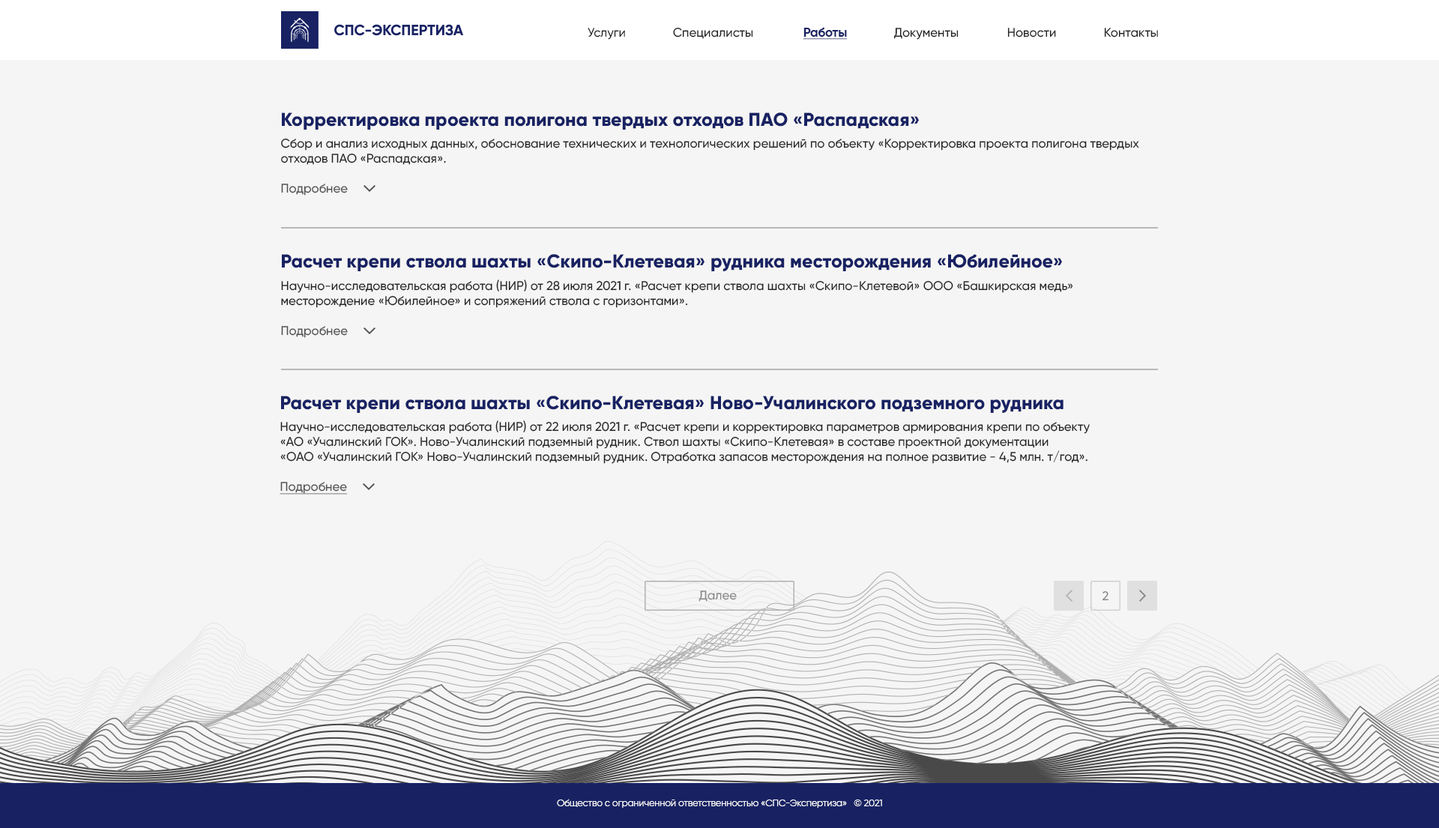
<style>
.page{position:relative;width:1439px;height:828px;background:#f5f5f5}
.page>*{position:absolute;margin:0}
.t1{font:12.5px "Gilroy-Medium";color:#212121}
.t2{font:12.5px "Gilroy-Bold";color:#182263;text-decoration:underline}
.t3{font:12.5px "Gilroy-Medium";color:#212121;text-transform:uppercase}
.t4{font:18.7px "Gilroy-ExtraBold";color:#182263}
.t5{font:18.7px/22.5px "Gilroy-ExtraBold";color:#182263}
.t6{font:18.7px/21.9px "Gilroy-ExtraBold";color:#182263}
.t7{font:12.5px/21.9px "Gilroy-Medium";color:#212121}
.t8{font:12.5px "Gilroy-Medium";color:#505050}
.t9{font:12.5px/22.5px "Gilroy-Medium";color:#212121}
.t10{font:12.5px "Gilroy-Medium";color:#505050;text-decoration:underline}
.t11{font:12.5px "Gilroy-Medium";color:#898989}
.t12{font:9.4px "Gilroy-Regular";color:#ffffff}
</style>
<div class="page">
<p class="t1" style="left:588px;top:28px;width:37px;height:12px">Услуги</p>
<p class="t1" style="left:673px;top:27px;width:80px;height:12px">Специалисты</p>
<p class="t2" style="left:803px;top:27px;width:45px;height:13px">Работы</p>
<p class="t1" style="left:894px;top:28px;width:65px;height:12px"><span class="t3">д</span>окументы</p>
<p class="t1" style="left:1008px;top:28px;width:48px;height:9px"><span class="t3">н</span>овости</p>
<p class="t1" style="left:1104px;top:28px;width:54px;height:9px"><span class="t3">к</span>онтакты</p>
<p class="t1" style="left:281px;top:112px;width:859px;height:84px"><span class="t4">Коррек</span><span class="t5">тировка проекта пол</span><span class="t6">игона твердых отходов ПАО «Распадская»<br></span><span class="t7">Сбор и анализ исходных данных, обосно</span>вание технических и технологических решений по объекту «Корректировка проекта полигона твердых <br>отходов ПАО «Распадская».<br><br><span class="t8">Подробнее</span></p>
<p class="t1" style="left:281px;top:254px;width:792px;height:84px"><span class="t4">Расч</span><span class="t6">ет крепи ствола шахты «Скипо-Клетевая» рудника месторождения «Юбилейное»<br></span><span class="t7">Научно</span><span class="t9">-и</span>сследовательская работа (НИР) от 28 июля 2021 г. «Расчет крепи ствола шахты «Скипо-Клетевой» ООО «Башкирская медь»<br>месторождение «Юбилейное» и сопряжений ствола с горизонтами».<br><span class="t8"><br>Подробнее</span></p>
<p class="t1" style="left:280px;top:396px;width:810px;height:99px"><span class="t4">Расчет крепи ствола шахты «Скипо-Клетевая» Ново-Учалинс</span><span class="t6">кого подземного рудника<br></span><span class="t7">Научно-исследовательская работа (НИР) от 22 июля 2021 г. «Расчет крепи и корректировка пар</span>аметров армирования крепи по объекту <br>«АО «Учалинский ГОК». Ново-Учалинский подземный рудник. Ствол шахты «Скипо-Клетевая» в составе проектной документации <br>«ОАО «Учалинский ГОК» Ново-Учалинский подземный рудник. Отработка запасов месторождения на полное развитие - 4,5 млн. т/год».<br><br><span class="t10">Подробнее</span></p>
<p class="t11" style="left:699px;top:591px;width:38px;height:11px">Далее</p>
<p class="t11" style="left:1102px;top:591px;width:7px;height:10px">2</p>
<p class="t12" style="left:557px;top:799px;width:325px;height:9px">Общество с ограниченной ответственностью «СПС-Экспертиза»   © 2021</p>
</div>
